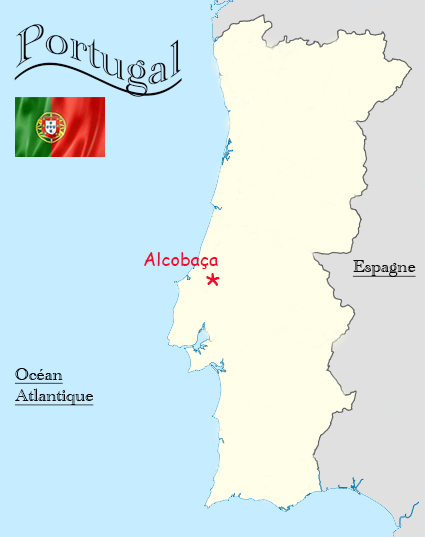
<style>
.page{position:relative;width:425px;height:537px;background:#c6ecff}
.page>*{position:absolute;margin:0}
.t1{font:48px "AcademyEngravedLetPlain";color:#0a0908;text-decoration:underline}
.t2{font:18px "ComicSansMS";color:#f20c2d}
.t3{font:18px "AcademyEngravedLetPlain";color:#0a0908;text-decoration:underline}
.t4{font:30px "ComicSansMS";color:#f20c2d}
</style>
<div class="page">
<p class="t1" style="left:14px;top:24px;width:168px;height:73px">Portugal</p>
<p class="t2" style="left:144px;top:252px;width:74px;height:17px">Alcobaça</p>
<p class="t3" style="left:352px;top:260px;width:64px;height:17px">Espagne</p>
<p class="t4" style="left:206px;top:273px;width:14px;height:13px">*</p>
<p class="t3" style="left:14px;top:368px;width:80px;height:38px">Océan<br>Atlantique</p>
</div>
